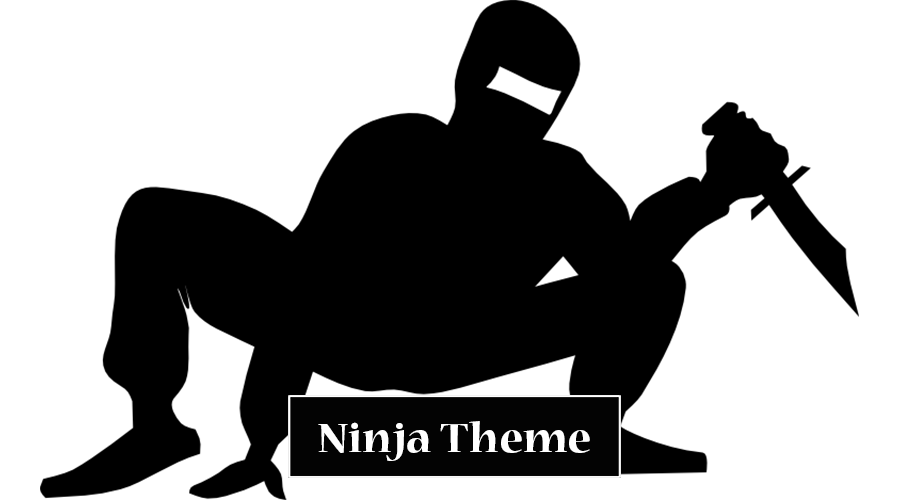
<style>
.page{position:relative;width:900px;height:500px;background:#ffffff}
.page>*{position:absolute;margin:0}
.t1{font:45.7px "NuevaStd-Bold";color:#ffffff;scale:1.06 1}
</style>
<div class="page">
<p class="t1" style="left:318px;top:421px;width:272px;height:40px">Ninja Theme</p>
</div>
